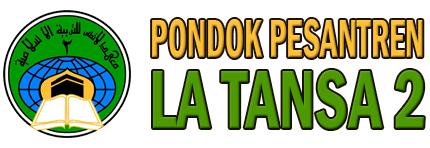
<style>
.page{position:relative;width:430px;height:148px;background:#ffffff}
.page>*{position:absolute;margin:0}
.t1{font:55.5px "FranklinGothic-DemiCond";color:#febf32;scale:0.62 1}
.t2{font:85.2px "FranklinGothic-DemiCond";color:#4c9900;scale:0.76 1}
</style>
<div class="page">
<p class="t1" style="left:152px;top:19px;width:271px;height:39px">PONDOK PESANTREN</p>
<p class="t2" style="left:153px;top:70px;width:271px;height:59px">LA TANSA 2</p>
</div>
